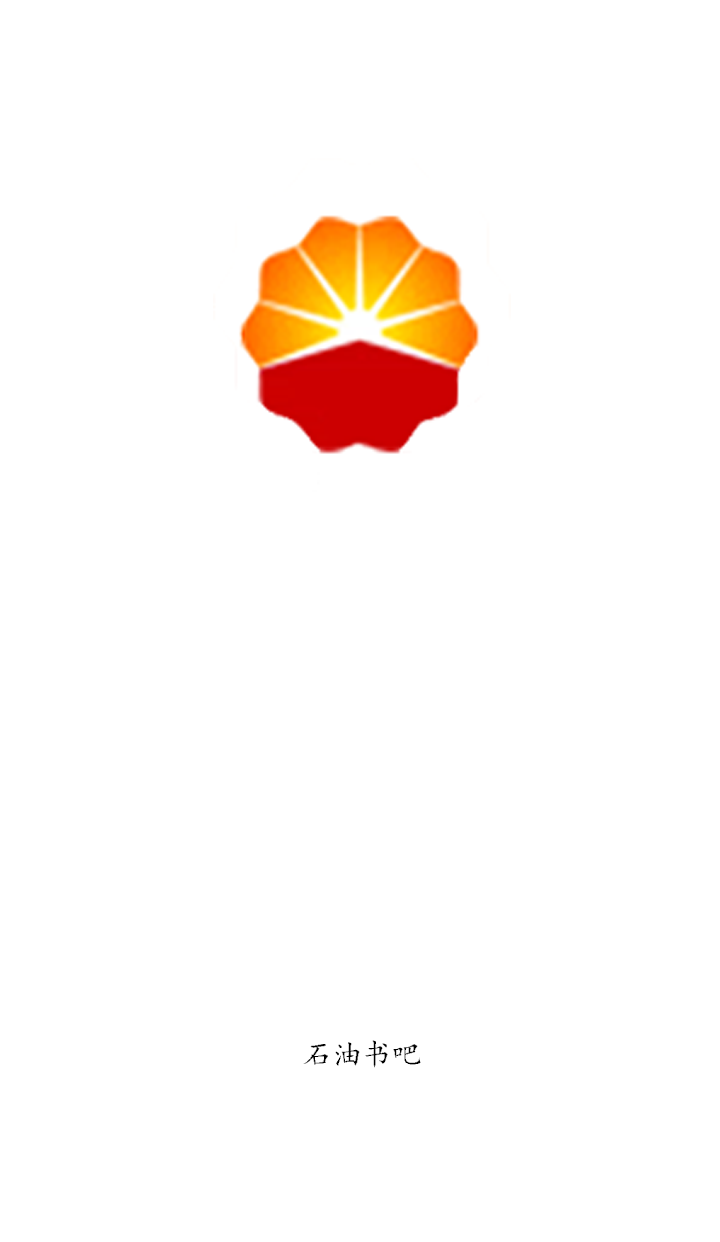
<style>
.page{position:relative;width:720px;height:1242px;background:#ffffff}
.page>*{position:absolute;margin:0}
.t1{font:30px "¿¬Ìå";color:#000000}
</style>
<div class="page">
<p class="t1" style="left:303px;top:1040px;width:118px;height:28px">石油书吧</p>
</div>
